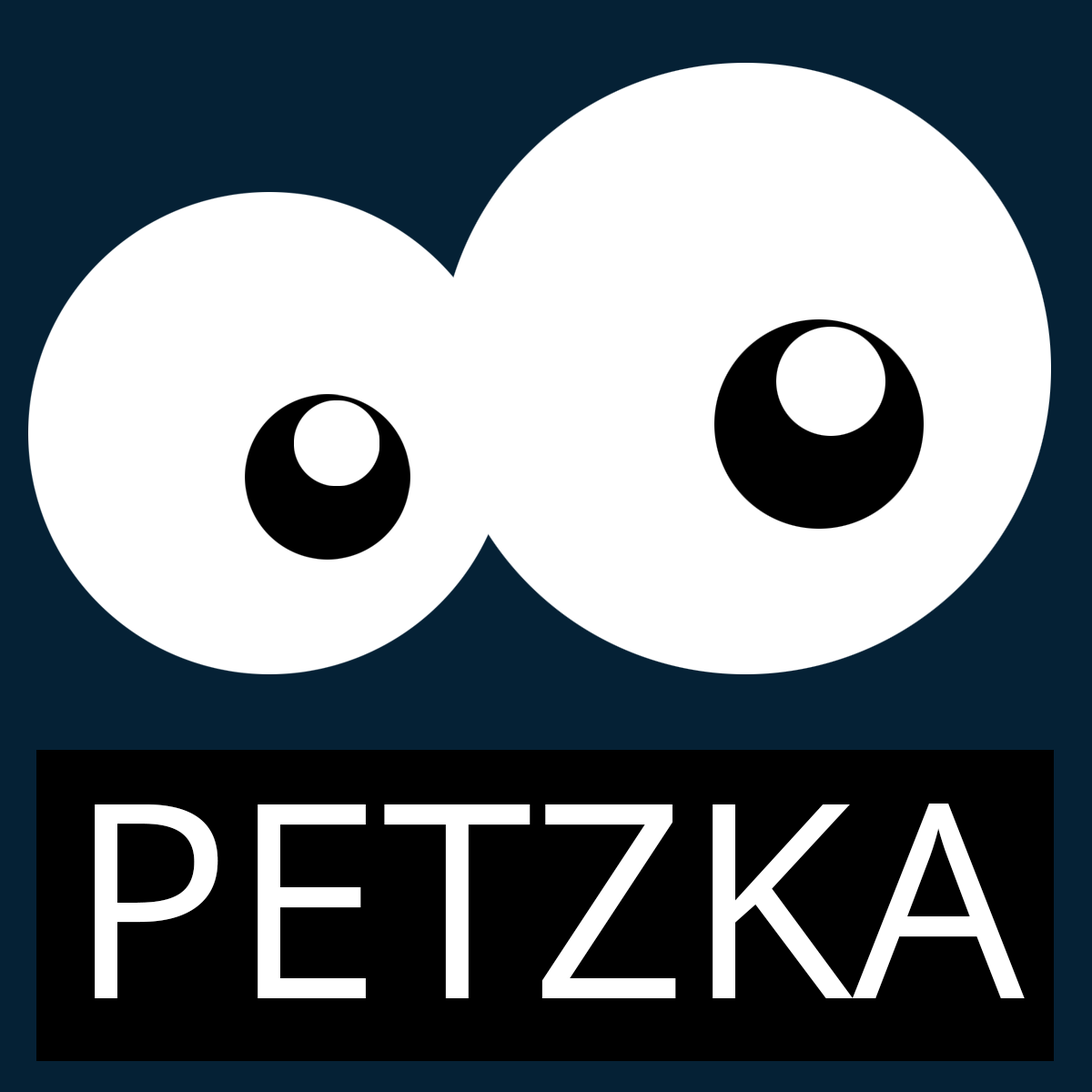
<style>
.page{position:relative;width:1092px;height:1092px;background:#ffffff}
.page>*{position:absolute;margin:0}
.t1{font:270.9px "OpenSans";color:#ffffff}
</style>
<div class="page">
<p class="t1" style="left:95px;top:804px;width:930px;height:194px">PETZKA</p>
</div>
